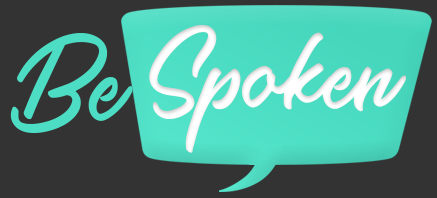
<style>
.page{position:relative;width:437px;height:198px;background:#333333}
.page>*{position:absolute;margin:0}
.t1{font:102.8px "SalteryRegular";color:#ffffff;scale:1.03 1}
.t2{font:107.7px "SalteryRegular";color:#4cddc4}
</style>
<div class="page">
<p class="t1" style="left:149px;top:25px;width:257px;height:128px">Spoken</p>
<p class="t2" style="left:10px;top:33px;width:123px;height:100px">Be</p>
</div>
